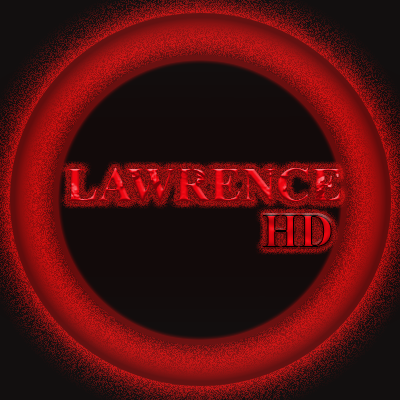
<style>
.page{position:relative;width:400px;height:400px}
.page>*{position:absolute;margin:0}
.t1{font:48px "TimesNewRomanPS-BoldMT"}
</style>
<div class="page">
<p class="t1" style="left:66px;top:168px;width:275px;height:34px">LAWRENCE</p>
<p class="t1" style="left:263px;top:215px;width:69px;height:32px">HD</p>
</div>
